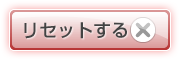
<style>
.page{position:relative;width:180px;height:60px}
.page>*{position:absolute;margin:0}
.t1{font:18px "ShinGoPro-Medium";color:#434343}
</style>
<div class="page">
<p class="t1" style="left:24px;top:22px;width:103px;height:17px">リセットする</p>
</div>
